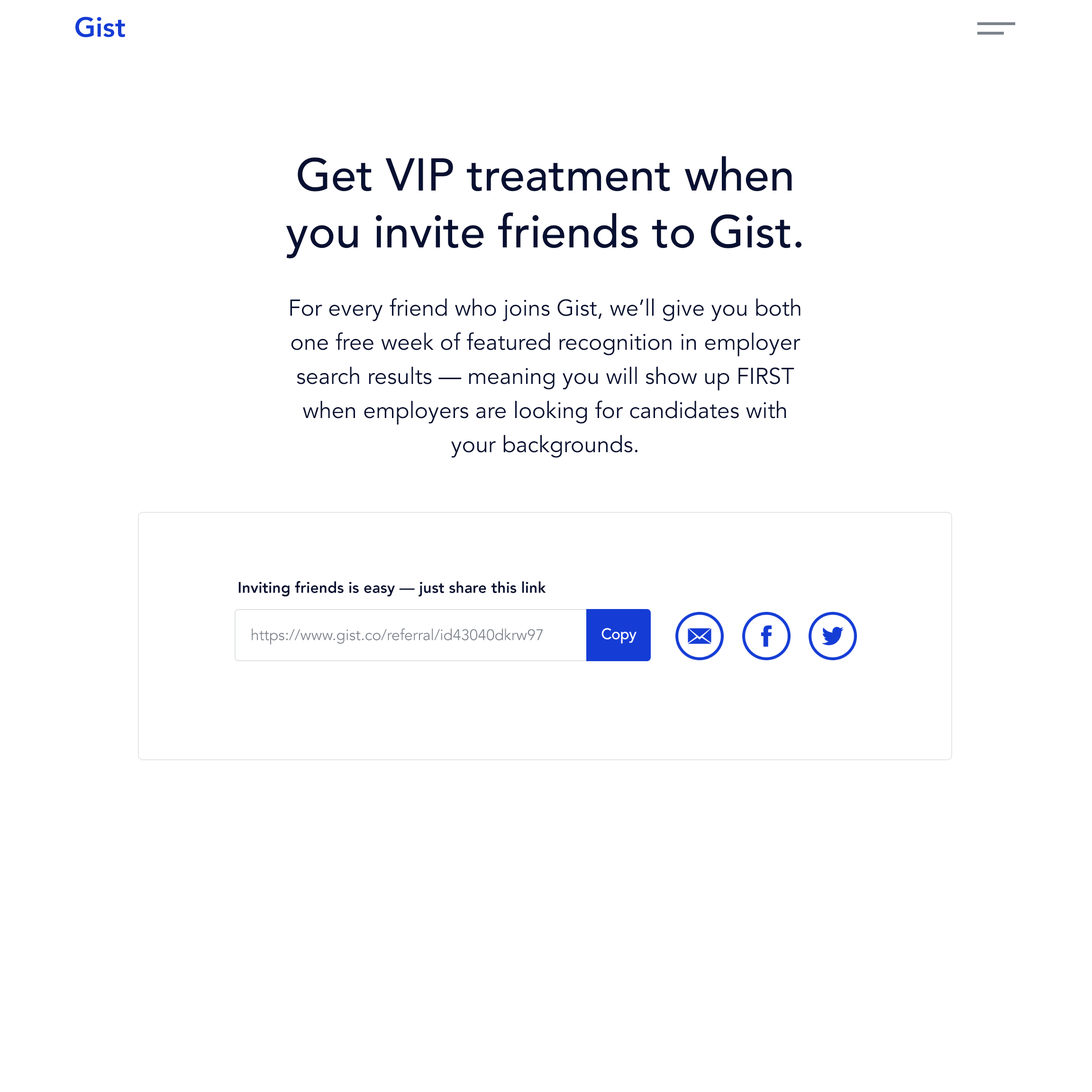
<style>
.page{position:relative;width:1092px;height:1092px;background:#ffffff}
.page>*{position:absolute;margin:0}
.t1{font:27.5px "Avenir-Heavy";color:#153dd5}
.t2{font:22.7px/34.1px "Avenir-Book";color:#071031}
.t3{font:45.5px/56.9px "Avenir-Medium";color:#071031}
.t4{font:15.2px "Avenir-Heavy";color:#071031}
.t5{font:15.2px "Avenir-Book";color:#7c838d}
.t6{font:15.2px "Avenir-Medium";letter-spacing:-0.025em;color:#ffffff}
</style>
<div class="page">
<p class="t1" style="left:75px;top:17px;width:50px;height:20px">Gist</p>
<p class="t2" style="left:286px;top:156px;width:515px;height:302px;text-align:center"><span class="t3">Get VIP treatment when<br>you invite friends to Gist.<br></span><br>For every friend who joins Gist, we’ll give you both<br>one free week of featured recognition in employer<br>search results — meaning you will show up FIRST<br>when employers are looking for candidates with<br>your backgrounds.</p>
<p class="t4" style="left:238px;top:581px;width:308px;height:16px">Inviting friends is easy — just share this link</p>
<p class="t5" style="left:252px;top:628px;width:291px;height:17px">https://www.gist.co/referral/id43040dkrw97</p>
<p class="t6" style="left:601px;top:628px;width:36px;height:16px">Copy</p>
</div>
